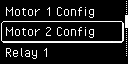
<style>
.page{position:relative;width:128px;height:64px;background:#000000}
.page>*{position:absolute;margin:0}
.t1{font:16px "PixelOperator";color:#ffffff}
</style>
<div class="page">
<p class="t1" style="left:5px;top:7px;width:89px;height:11px">Motor 1 Config</p>
<p class="t1" style="left:5px;top:27px;width:89px;height:11px">Motor 2 Config</p>
<p class="t1" style="left:5px;top:48px;width:42px;height:11px">Relay 1</p>
</div>
